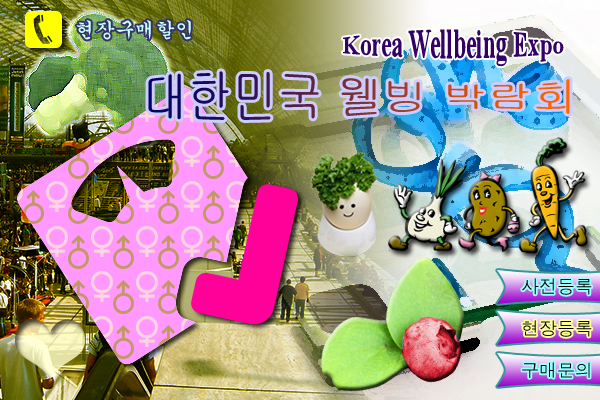
<style>
.page{position:relative;width:600px;height:400px}
.page>*{position:absolute;margin:0}
.t1{font:20px "Gungsuh";color:#ccffff}
.t2{font:23px "TimesNewRomanPS-BoldMT";color:#330066}
.t3{font:45px "Gulim"}
.t4{font:18px "Dotum";color:#000000}
</style>
<div class="page">
<p class="t1" style="left:76px;top:20px;width:115px;height:20px">현장구매할인</p>
<p class="t2" style="left:343px;top:29px;width:221px;height:38px">Korea Wellbeing Expo</p>
<p class="t3" style="left:148px;top:71px;width:422px;height:49px">대한민국 웰빙 박람회</p>
<p class="t4" style="left:522px;top:278px;width:70px;height:17px">사전등록</p>
<p class="t4" style="left:522px;top:320px;width:70px;height:17px">현장등록</p>
<p class="t4" style="left:522px;top:362px;width:68px;height:16px">구매문의</p>
</div>
